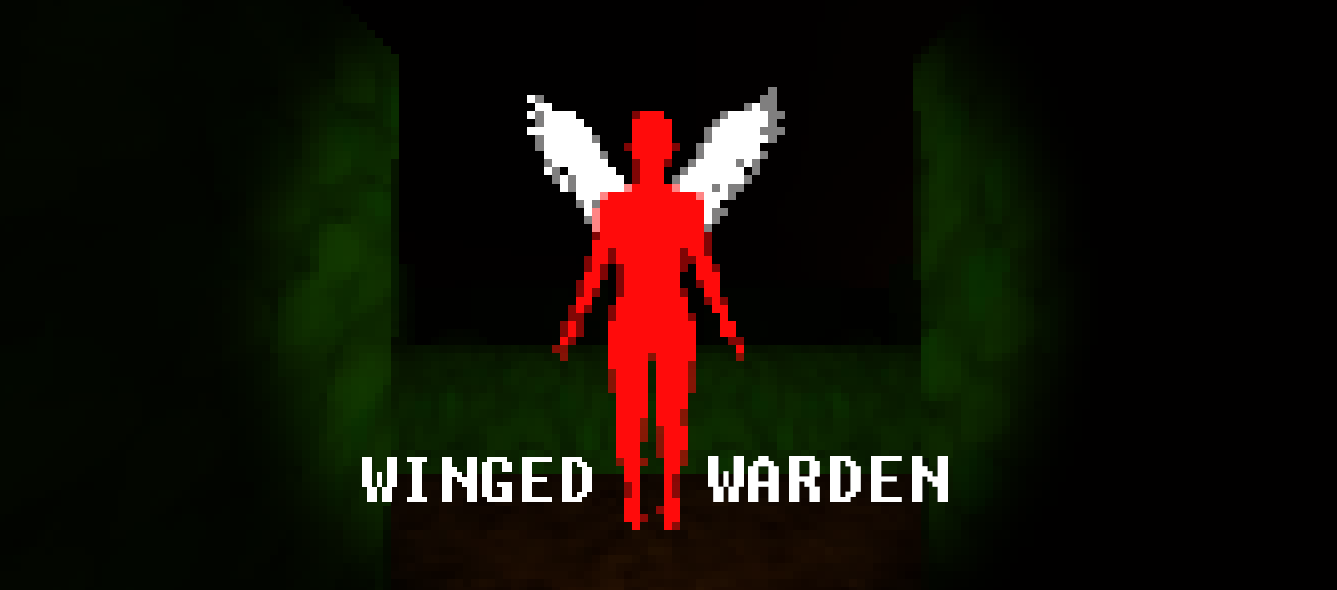
<style>
.page{position:relative;width:1337px;height:590px;background:#010000}
.page>*{position:absolute;margin:0}
.t1{font:64.1px "Fixedsys";color:#ffffff}
.t2{font:65.4px "Fixedsys";color:#ffffff}
</style>
<div class="page">
<p class="t1" style="left:362px;top:457px;width:230px;height:45px">WINGED</p>
<p class="t2" style="left:708px;top:456px;width:240px;height:46px">WARDEN</p>
</div>
